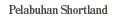
<style>
.page{position:relative;width:115px;height:18px;background:#ffffff}
.page>*{position:absolute;margin:0}
.t1{font:12px "RyuminPro-ExBold";letter-spacing:-0.04em;color:#4c4843;scale:0.9 1}
</style>
<div class="page">
<p class="t1" style="left:8px;top:4px;width:100px;height:10px">Pelabuhan Shortland</p>
</div>
